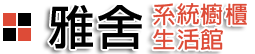
<style>
.page{position:relative;width:255px;height:54px;background:#ffffff}
.page>*{position:absolute;margin:0}
.t1{font:48px "LiGothicMed";letter-spacing:0.025em;color:#000000}
.t2{font:23px/25px "AdobeFanHeitiStd-Bold";letter-spacing:0.05em;color:#dd4b37}
</style>
<div class="page">
<p class="t1" style="left:49px;top:5px;width:93px;height:44px">雅舍</p>
<p class="t2" style="left:153px;top:3px;width:94px;height:47px">系統櫥櫃<br>生活館</p>
</div>
